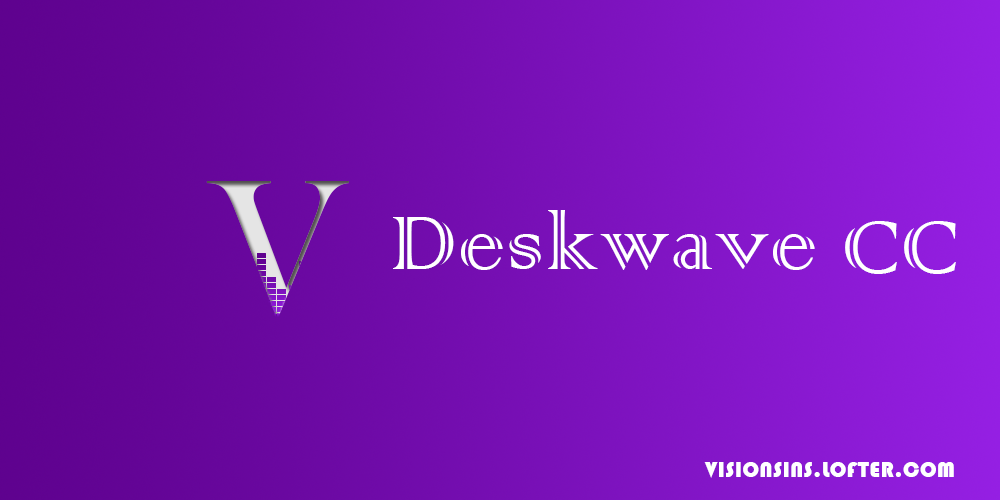
<style>
.page{position:relative;width:1000px;height:500px}
.page>*{position:absolute;margin:0}
.t1{font:100px "ColonnaMT";letter-spacing:0.02em;color:#ffffff}
.t2{font:22px "Bauhaus93";letter-spacing:0.02em;color:#ffffff}
</style>
<div class="page">
<p class="t1" style="left:393px;top:210px;width:422px;height:60px">Deskwave</p>
<p class="t1" style="left:845px;top:221px;width:111px;height:53px">CC</p>
<p class="t2" style="left:704px;top:462px;width:250px;height:16px">VISIONSINS.LOFTER.COM</p>
</div>
